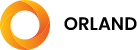
<style>
.page{position:relative;width:137px;height:50px;background:#ffffff}
.page>*{position:absolute;margin:0}
.t1{font:18.1px "Poppins-SemiBold";color:#000000}
</style>
<div class="page">
<p class="t1" style="left:64px;top:17px;width:73px;height:13px">ORLAND</p>
</div>
